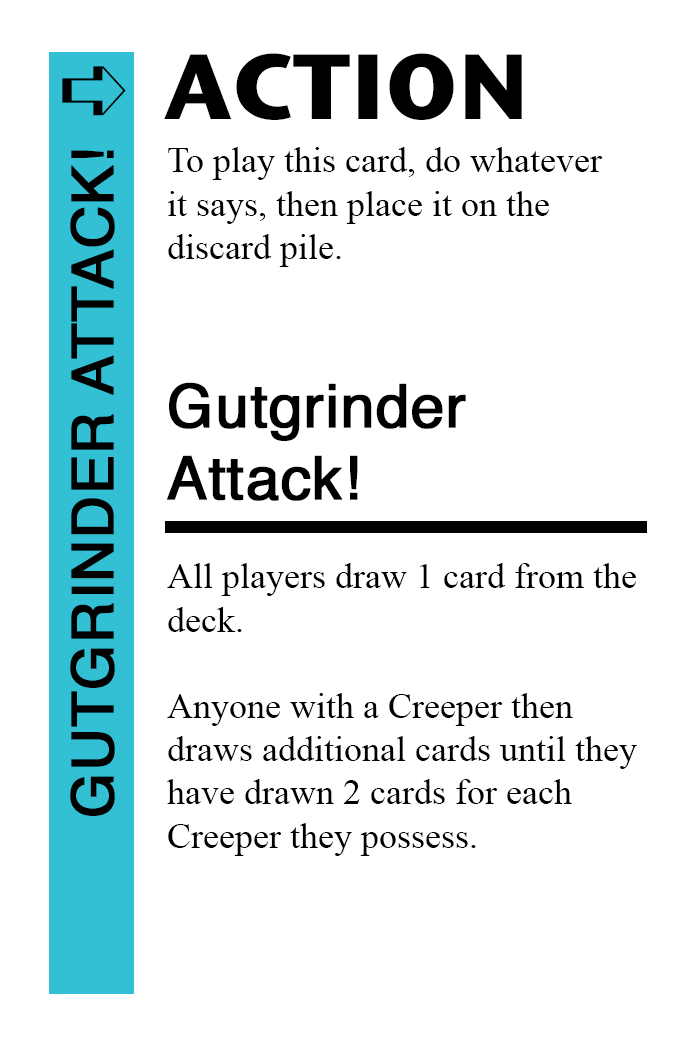
<style>
.page{position:relative;width:700px;height:1042px;background:#ffffff}
.page>*{position:absolute;margin:0}
.t1{font:92px "StoneSansITC-Bold";color:#000000}
.t2{font:82px "MS-Gothic";color:#000000}
.t3{font:58px "Helvetica";color:#000000;font-weight:bold}
.t4{font:36px "TimesNewRomanPSMT";color:#000000}
.t5{font:60px "Helvetica";color:#000000;font-weight:bold}
</style>
<div class="page">
<p class="t1" style="left:164px;top:53px;width:358px;height:67px">ACTION</p>
<p class="t2" style="left:62px;top:66px;width:64px;height:50px">➪</p>
<p class="t3" style="left:70px;top:150px;width:45px;height:666px;rotate:-90deg">GUTGRINDER ATTACK!</p>
<p class="t4" style="left:168px;top:147px;width:435px;height:120px">To play this card, do whatever<br>it says, then place it on the<br>discard pile.</p>
<p class="t5" style="left:167px;top:382px;width:299px;height:119px">Gutgrinder<br>Attack!</p>
<p class="t4" style="left:167px;top:563px;width:470px;height:293px">All players draw 1 card from the<br>deck.<br><br>Anyone with a Creeper then <br>draws additional cards until they<br>have drawn 2 cards for each<br>Creeper they possess.</p>
</div>
